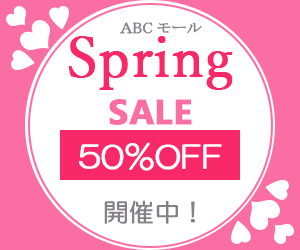
<style>
.page{position:relative;width:300px;height:250px;background:#ffffff}
.page>*{position:absolute;margin:0}
.t1{font:15px "HGPMinchoL";color:#858088;font-weight:bold}
.t2{font:55px "YuMincho-Regular";color:#f92868;font-weight:bold}
.t3{font:35px "MicrosoftPhagsPa-Bold";color:#fb6ea3;font-weight:bold}
.t4{font:30px "HGMaruGothicMPRO";color:#ffffff;font-weight:bold}
.t5{font:25px "HGMaruGothicMPRO";color:#858088;font-weight:bold}
</style>
<div class="page">
<p class="t1" style="left:119px;top:22px;width:83px;height:12px">ＡBCモール</p>
<p class="t2" style="left:68px;top:36px;width:165px;height:54px">Spring</p>
<p class="t3" style="left:109px;top:99px;width:83px;height:26px">SALE</p>
<p class="t4" style="left:79px;top:142px;width:143px;height:29px">50％OFF</p>
<p class="t5" style="left:104px;top:200px;width:91px;height:24px">開催中！</p>
</div>
